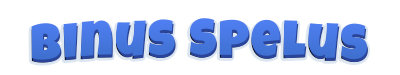
<style>
.page{position:relative;width:400px;height:75px;background:#ffffff}
.page>*{position:absolute;margin:0}
.t1{font:50px "LuckiestGuy-Regular";letter-spacing:0.045em;color:#4575dc}
.t2{font:50px "LuckiestGuy-Regular";letter-spacing:0.045em;color:#4777e1}
.t3{font:50px "LuckiestGuy-Regular";letter-spacing:0.045em;color:#4475db}
</style>
<div class="page">
<p class="t1" style="left:31px;top:21px;width:336px;height:42px">Binus Spelus</p>
<p class="t2" style="left:31px;top:18px;width:336px;height:42px">Binus Spelus</p>
<p class="t3" style="left:32px;top:21px;width:336px;height:42px">Binus Spelus</p>
</div>
